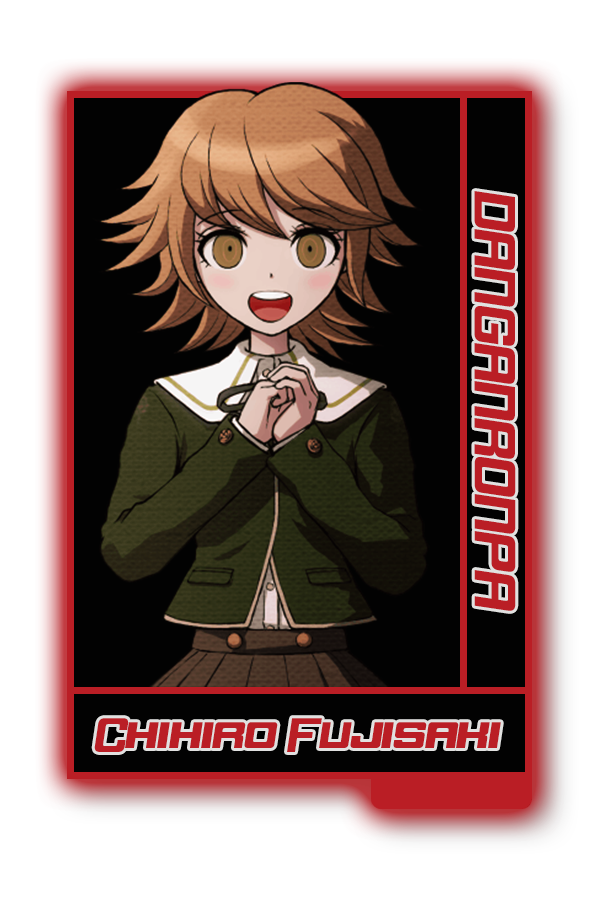
<style>
.page{position:relative;width:600px;height:900px;background:#020202}
.page>*{position:absolute;margin:0}
.t1{font:48.8px "DorBlue";color:#bb2c2e}
.t2{font:40.6px "DorBlue";color:#bb2c2e}
</style>
<div class="page">
<p class="t1" style="left:474px;top:191px;width:42px;height:420px;rotate:90deg">DANGANRONPA</p>
<p class="t2" style="left:94px;top:718px;width:407px;height:34px">Chihiro Fujisaki</p>
</div>
